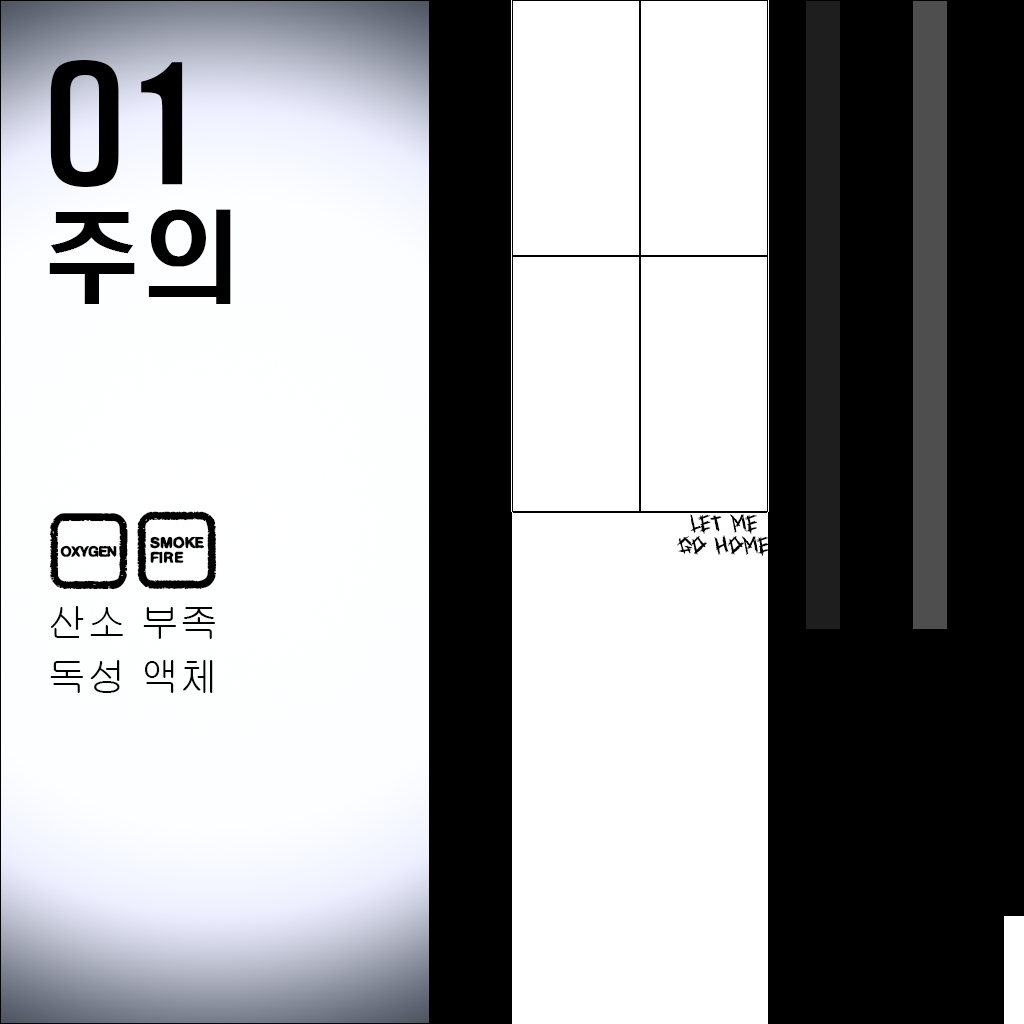
<style>
.page{position:relative;width:1024px;height:1024px;background:#000000}
.page>*{position:absolute;margin:0}
.t1{font:143.8px "H2hdrM";color:#000000}
.t2{font:100px "H2hdrM";color:#000000}
.t3{font:100px "PlaneCrash";color:#000000}
.t4{font:18px "HelpMe";color:#000000}
.t5{font:40px "Gulim";color:#000000}
</style>
<div class="page">
<p class="t1" style="left:50px;top:60px;width:133px;height:127px">01</p>
<p class="t2" style="left:49px;top:209px;width:182px;height:95px">주의</p>
<p class="t3" style="left:49px;top:511px;width:168px;height:79px">HY</p>
<p class="t4" style="left:677px;top:514px;width:92px;height:42px;text-align:center">let me<br>go home</p>
<p class="t5" style="left:50px;top:606px;width:165px;height:33px">산소 부족</p>
<p class="t5" style="left:50px;top:660px;width:163px;height:33px">독성 액체</p>
</div>
